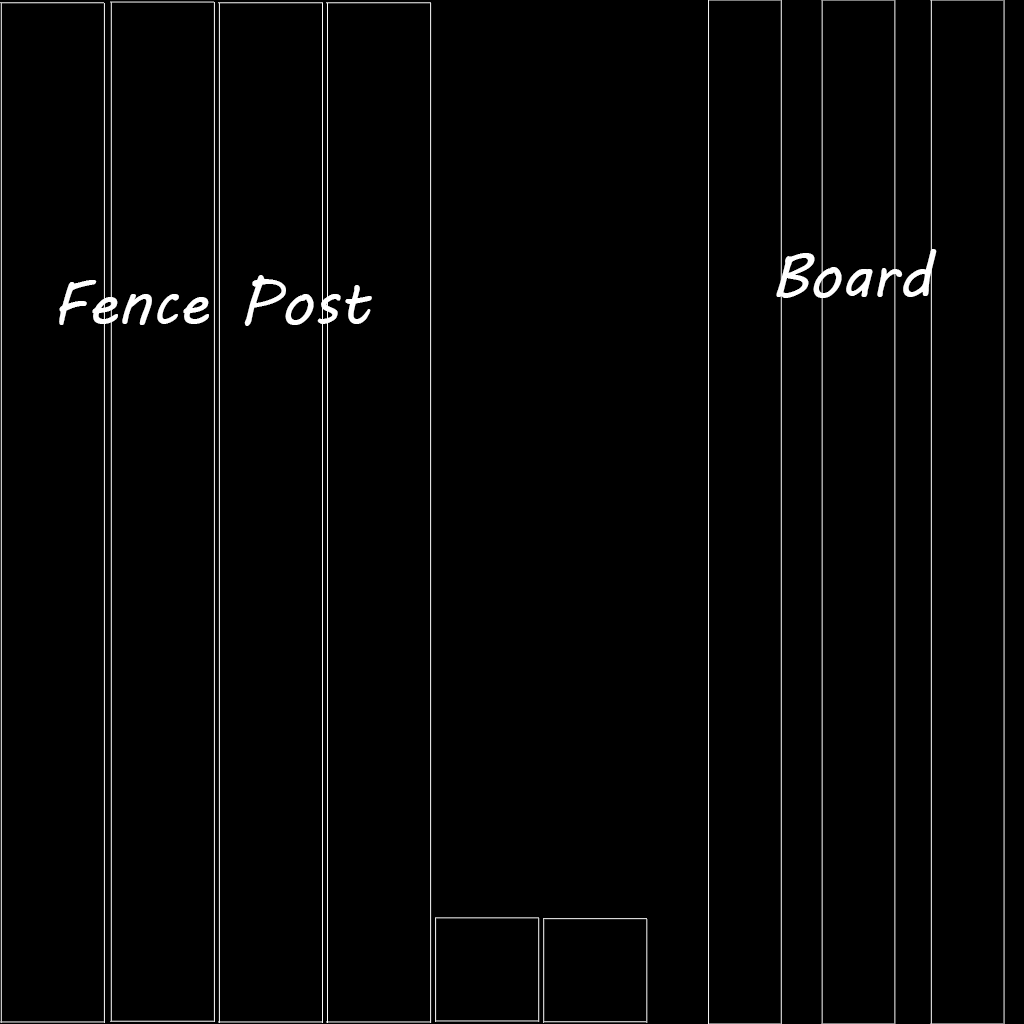
<style>
.page{position:relative;width:1024px;height:1024px;background:#000000}
.page>*{position:absolute;margin:0}
.t1{font:62px "MVBoli";color:#ffffff}
</style>
<div class="page">
<p class="t1" style="left:776px;top:249px;width:161px;height:49px">Board</p>
<p class="t1" style="left:59px;top:275px;width:313px;height:51px">Fence Post</p>
</div>
